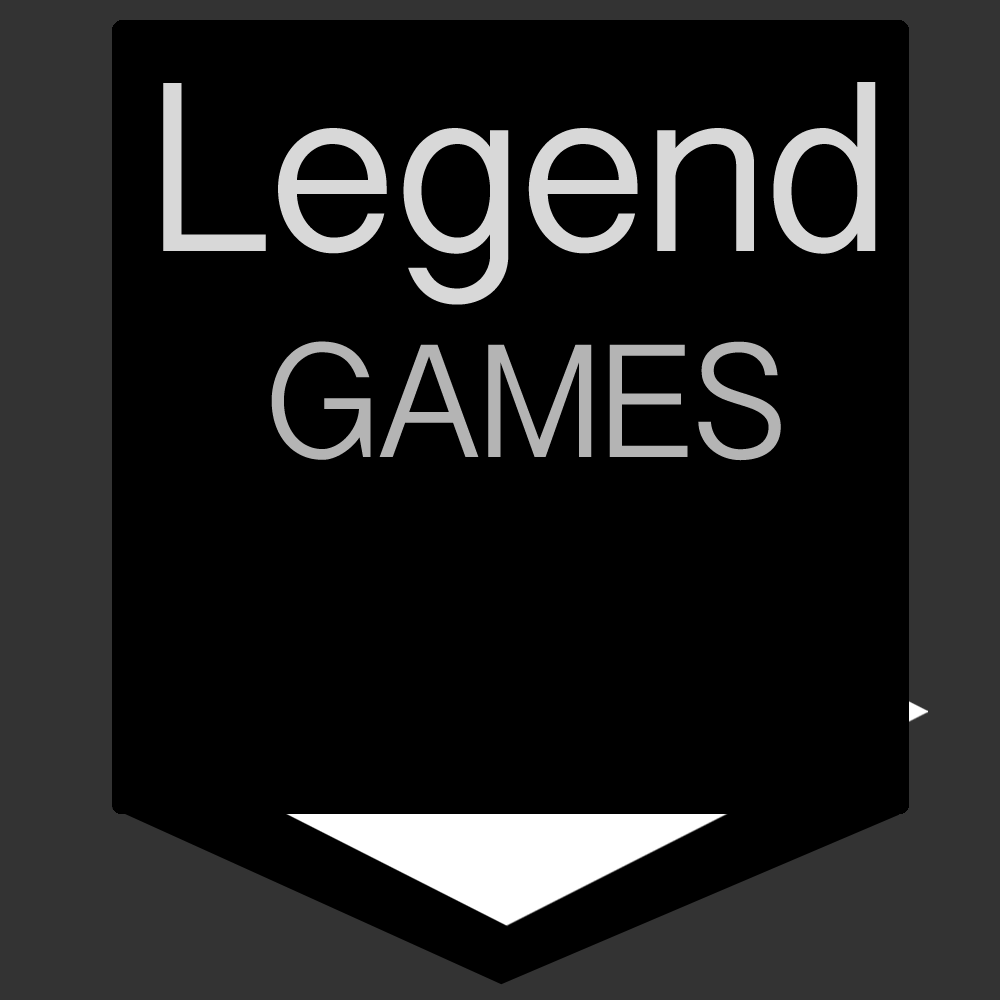
<style>
.page{position:relative;width:1000px;height:1000px;background:#000000}
.page>*{position:absolute;margin:0}
.t1{font:225px "KannadaSangamMN";color:#d8d8d8}
.t2{font:150px "KannadaSangamMN";color:#b4b4b4}
</style>
<div class="page">
<p class="t1" style="left:163px;top:82px;width:713px;height:223px">Legend</p>
<p class="t2" style="left:271px;top:341px;width:510px;height:120px">GAMES</p>
</div>
